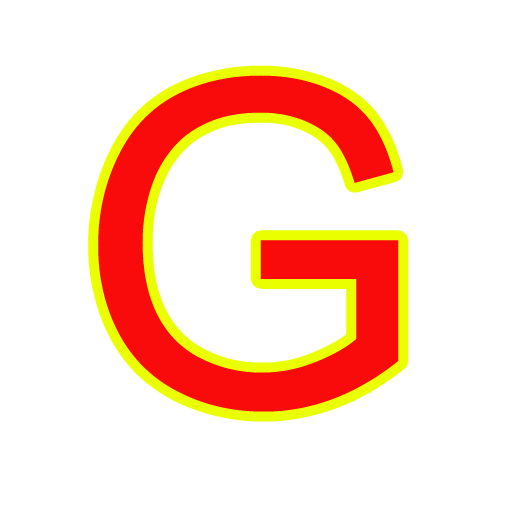
<style>
.page{position:relative;width:512px;height:512px;background:#ffffff}
.page>*{position:absolute;margin:0}
.t1{font:453.3px "ArialMT";color:#fa0b0b}
</style>
<div class="page">
<p class="t1" style="left:98px;top:75px;width:301px;height:337px">G</p>
</div>
